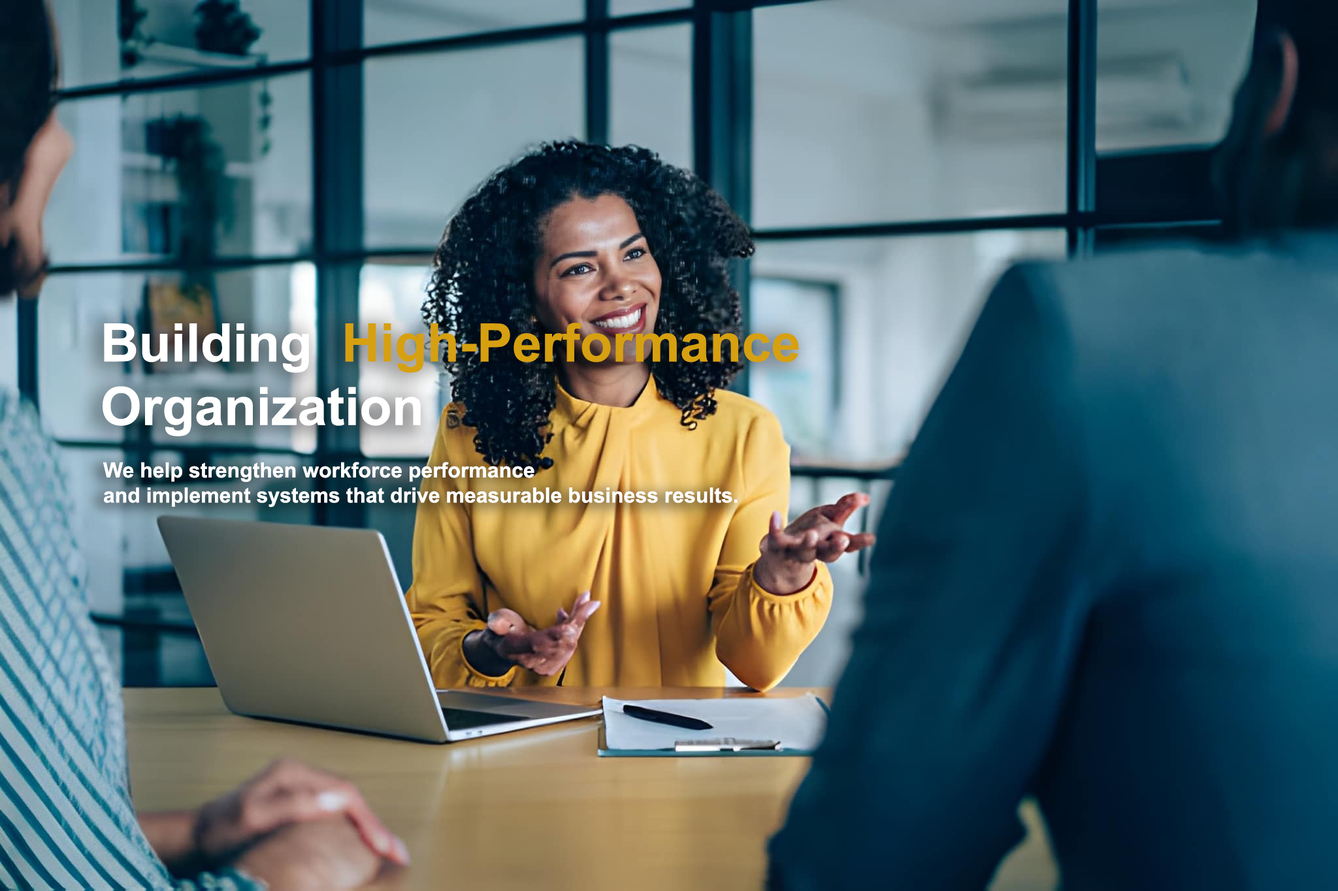
<style>
.page{position:relative;width:1338px;height:891px}
.page>*{position:absolute;margin:0}
.t1{font:53px "Arial-BoldMT";color:#d6a010}
.t2{font:53px "Arial-BoldMT";color:#ffffff}
.t3{font:20.9px "Arial-BoldMT";color:#ffffff}
</style>
<div class="page">
<p class="t1" style="left:103px;top:323px;width:696px;height:113px"><span class="t2">Building  </span>High-Performance<br><span class="t2">Organization</span></p>
<p class="t3" style="left:103px;top:462px;width:635px;height:46px">We help strengthen workforce performance <br>and implement systems that drive measurable business results.</p>
</div>
